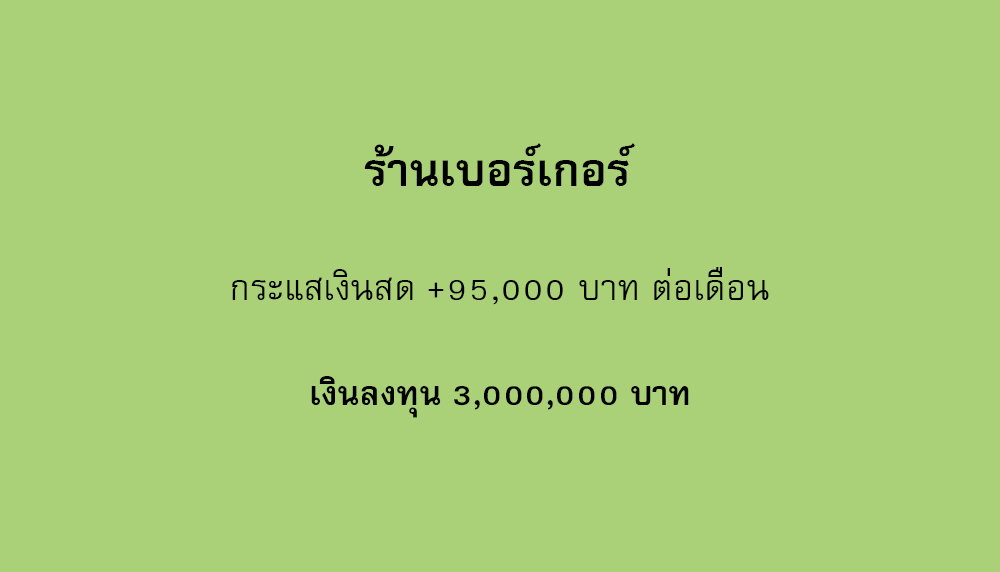
<style>
.page{position:relative;width:1000px;height:572px;background:#aad178}
.page>*{position:absolute;margin:0}
.t1{font:64px "FreesiaUPCBold";color:#000000}
.t2{font:50px "FreesiaUPC";color:#000000}
.t3{font:47px "FreesiaUPCBold";color:#000000}
</style>
<div class="page">
<p class="t1" style="left:364px;top:143px;width:271px;height:43px">ร้านเบอร์เกอร์</p>
<p class="t2" style="left:232px;top:267px;width:537px;height:38px">กระแสเงินสด +95,000 บาท ต่อเดือน</p>
<p class="t3" style="left:311px;top:376px;width:378px;height:42px">เงินลงทุน 3,000,000 บาท</p>
</div>
